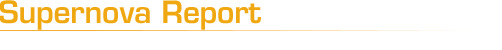
<style>
.page{position:relative;width:502px;height:50px;background:#ffffff}
.page>*{position:absolute;margin:0}
.t1{font:30px "Eurostile-Demi";letter-spacing:-0.01em;color:#f0a812}
</style>
<div class="page">
<p class="t1" style="left:0px;top:0px;width:261px;height:30px">Supernova Report</p>
</div>
